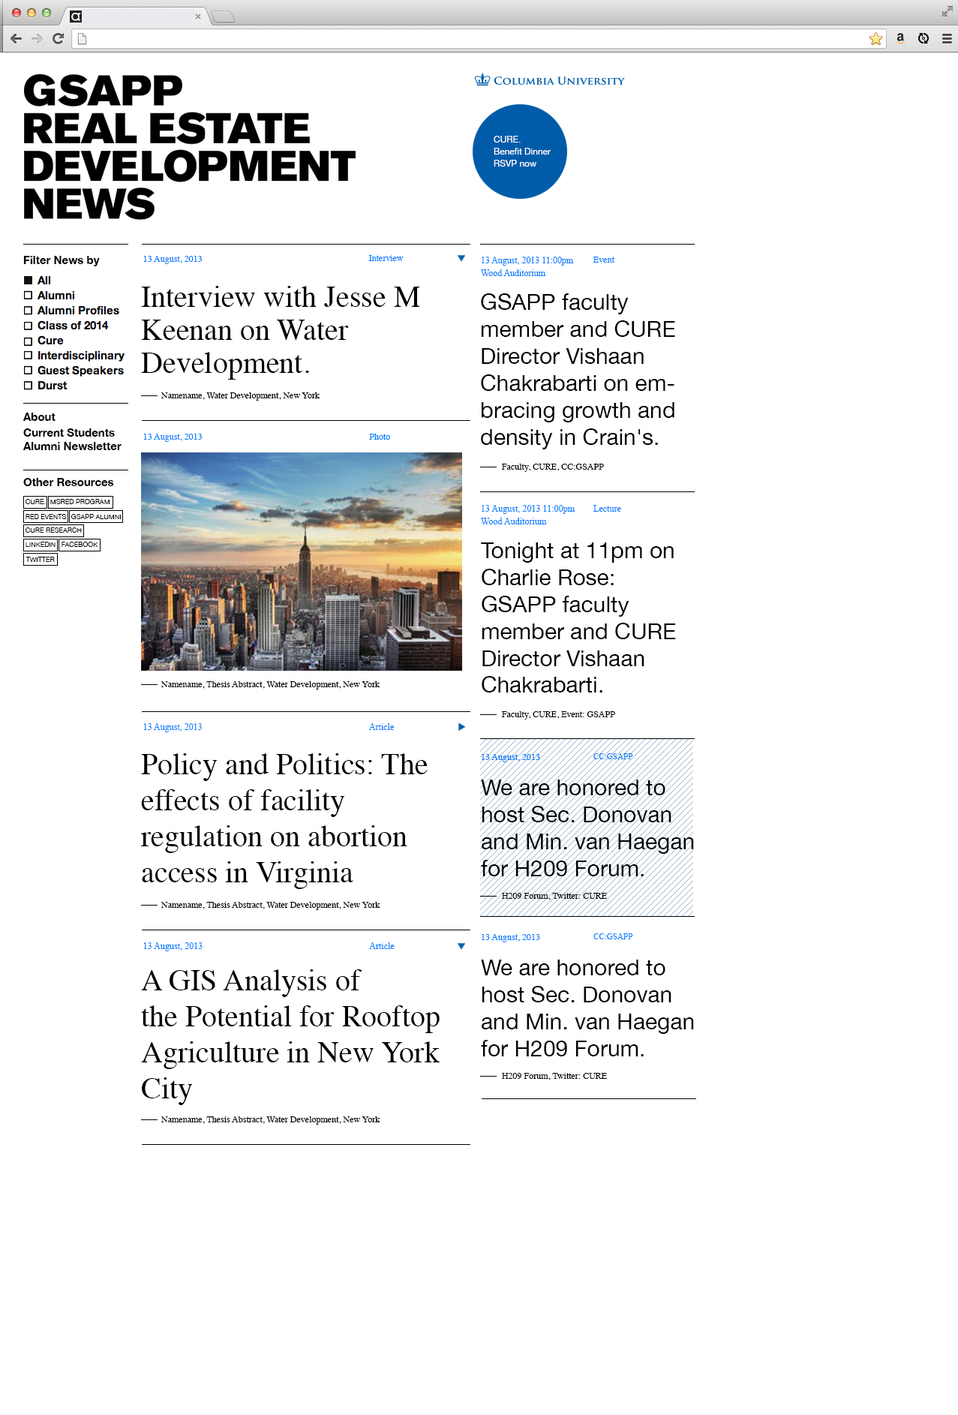
<style>
.page{position:relative;width:958px;height:1415px;background:#ffffff}
.page>*{position:absolute;margin:0}
.t1{font:9px/12px "HelveticaNeue";color:#ffffff}
.t2{font:11.3px "HelveticaNeue-Bold";color:#000001}
.t3{font:8.9px "Times-Roman";color:#007eff}
.t4{font:9px/12.8px "TimesNewRomanPSMT";color:#007eff}
.t5{font:30px/33px "Times-Roman";color:#000000}
.t6{font:22.5px "HelveticaNeue";color:#000000}
.t7{font:8.9px "Times-Roman";color:#000000}
.t8{font:9px "Times-Roman";color:#007eff}
.t9{font:9px "Times-Roman";color:#000000}
.t10{font:6.8px "HelveticaNeue";color:#000000}
.t11{font:9px "TimesNewRomanPSMT";color:#007eff}
.t12{font:8.9px "TimesNewRomanPSMT";color:#007eff}
.t13{font:30px "Times-Roman";color:#000000}
.t14{font:8.3px "TimesNewRomanPSMT";color:#007eff}
</style>
<div class="page">
<p class="t1" style="left:494px;top:136px;width:57px;height:31px">CURE. <br>Benefit Dinner<br>RSVP now</p>
<p class="t2" style="left:23px;top:256px;width:77px;height:10px">Filter News by</p>
<p class="t3" style="left:144px;top:256px;width:59px;height:8px">13 August, 2013</p>
<p class="t3" style="left:368px;top:255px;width:36px;height:6px">Interview</p>
<p class="t4" style="left:481px;top:257px;width:93px;height:19px">13 August, 2013 11:00pm<br>Wood Auditorium</p>
<p class="t3" style="left:593px;top:257px;width:22px;height:6px">Event</p>
<p class="t5" style="left:141px;top:286px;width:279px;height:94px">Interview with Jesse M Keenan on Water <br>Development.</p>
<p class="t6" style="left:481px;top:293px;width:194px;height:156px">GSAPP faculty member and CURE Director Vishaan Chakrabarti on embracing growth and density in Crain's.</p>
<p class="t7" style="left:161px;top:392px;width:159px;height:9px">Namename, Water Development, New York</p>
<p class="t2" style="left:23px;top:413px;width:33px;height:8px">About</p>
<p class="t2" style="left:23px;top:428px;width:92px;height:9px">Current Students</p>
<p class="t3" style="left:144px;top:434px;width:59px;height:8px">13 August, 2013</p>
<p class="t8" style="left:369px;top:434px;width:21px;height:6px">Photo</p>
<p class="t2" style="left:23px;top:442px;width:99px;height:8px">Alumni Newsletter</p>
<p class="t9" style="left:502px;top:464px;width:102px;height:8px">Faculty, CURE, CC:GSAPP</p>
<p class="t2" style="left:23px;top:478px;width:91px;height:8px">Other Resources</p>
<p class="t10" style="left:26px;top:499px;width:20px;height:5px">CURE.</p>
<p class="t10" style="left:50px;top:499px;width:60px;height:5px">MSRED PROGRAM</p>
<p class="t4" style="left:481px;top:505px;width:94px;height:19px">13 August, 2013 11:00pm<br>Wood Auditorium</p>
<p class="t11" style="left:593px;top:505px;width:28px;height:7px">Lecture</p>
<p class="t10" style="left:26px;top:514px;width:41px;height:5px">RED EVENTS</p>
<p class="t10" style="left:71px;top:514px;width:50px;height:5px">GSAPP ALUMNI</p>
<p class="t10" style="left:26px;top:527px;width:56px;height:6px">CURE RESEARCH</p>
<p class="t10" style="left:26px;top:542px;width:30px;height:5px">LINKEDIN</p>
<p class="t10" style="left:62px;top:542px;width:36px;height:5px">FACEBOOK</p>
<p class="t6" style="left:481px;top:542px;width:195px;height:150px">Tonight at 11pm on <br>Charlie Rose: GSAPP faculty member and CURE Director Vishaan Chakrabarti.</p>
<p class="t10" style="left:26px;top:557px;width:29px;height:5px">TWITTER</p>
<p class="t9" style="left:161px;top:681px;width:219px;height:8px">Namename, Thesis Abstract, Water Development, New York</p>
<p class="t9" style="left:502px;top:711px;width:113px;height:8px">Faculty, CURE, Event: GSAPP</p>
<p class="t12" style="left:144px;top:723px;width:58px;height:9px">13 August, 2013</p>
<p class="t11" style="left:369px;top:723px;width:26px;height:7px">Article</p>
<p class="t13" style="left:141px;top:753px;width:287px;height:136px">Policy and Politics: The effects of facility <br>regulation on abortion access in Virginia</p>
<p class="t3" style="left:482px;top:754px;width:58px;height:8px">13 August, 2013</p>
<p class="t14" style="left:593px;top:753px;width:40px;height:6px">CC:GSAPP</p>
<p class="t6" style="left:481px;top:779px;width:213px;height:97px">We are honored to host Sec. Donovan and Min. van Haegan for H209 Forum.</p>
<p class="t9" style="left:502px;top:893px;width:105px;height:7px">H209 Forum, Twitter: CURE</p>
<p class="t7" style="left:161px;top:902px;width:219px;height:8px">Namename, Thesis Abstract, Water Development, New York</p>
<p class="t3" style="left:482px;top:934px;width:58px;height:8px">13 August, 2013</p>
<p class="t14" style="left:593px;top:933px;width:40px;height:6px">CC:GSAPP</p>
<p class="t11" style="left:144px;top:942px;width:59px;height:9px">13 August, 2013</p>
<p class="t11" style="left:369px;top:942px;width:26px;height:7px">Article</p>
<p class="t6" style="left:481px;top:959px;width:213px;height:97px">We are honored to host Sec. Donovan and Min. van Haegan for H209 Forum.</p>
<p class="t13" style="left:141px;top:969px;width:299px;height:136px">A GIS Analysis of <br>the Potential for Rooftop Agriculture in New York City</p>
<p class="t9" style="left:502px;top:1073px;width:105px;height:7px">H209 Forum, Twitter: CURE</p>
<p class="t7" style="left:161px;top:1116px;width:219px;height:8px">Namename, Thesis Abstract, Water Development, New York</p>
</div>
